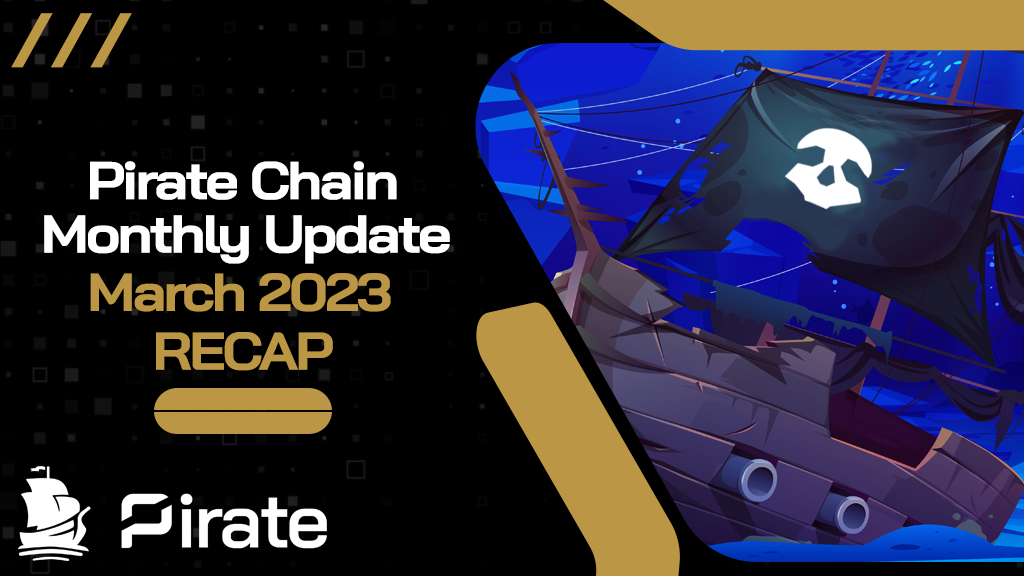
<style>
.page{position:relative;width:1024px;height:576px;background:#000000}
.page>*{position:absolute;margin:0}
.t1{font:72px "BaiJamjuree-Bold";letter-spacing:-0.05em;color:#bb9645;scale:1.1 1}
.t2{font:53.1px "BaiJamjuree-Bold";letter-spacing:-0.05em;color:#ffffff;scale:1.1 1}
.t3{font:53.1px "BaiJamjuree-Bold";letter-spacing:-0.05em;color:#bb9645;scale:1.1 1}
</style>
<div class="page">
<p class="t1" style="left:11px;top:13px;width:121px;height:55px">///</p>
<p class="t2" style="left:90px;top:161px;width:307px;height:39px">Pirate Chain</p>
<p class="t2" style="left:44px;top:215px;width:406px;height:49px">Monthly Update</p>
<p class="t3" style="left:90px;top:273px;width:301px;height:39px">March 2023</p>
<p class="t3" style="left:156px;top:332px;width:177px;height:39px">RECAP</p>
</div>
